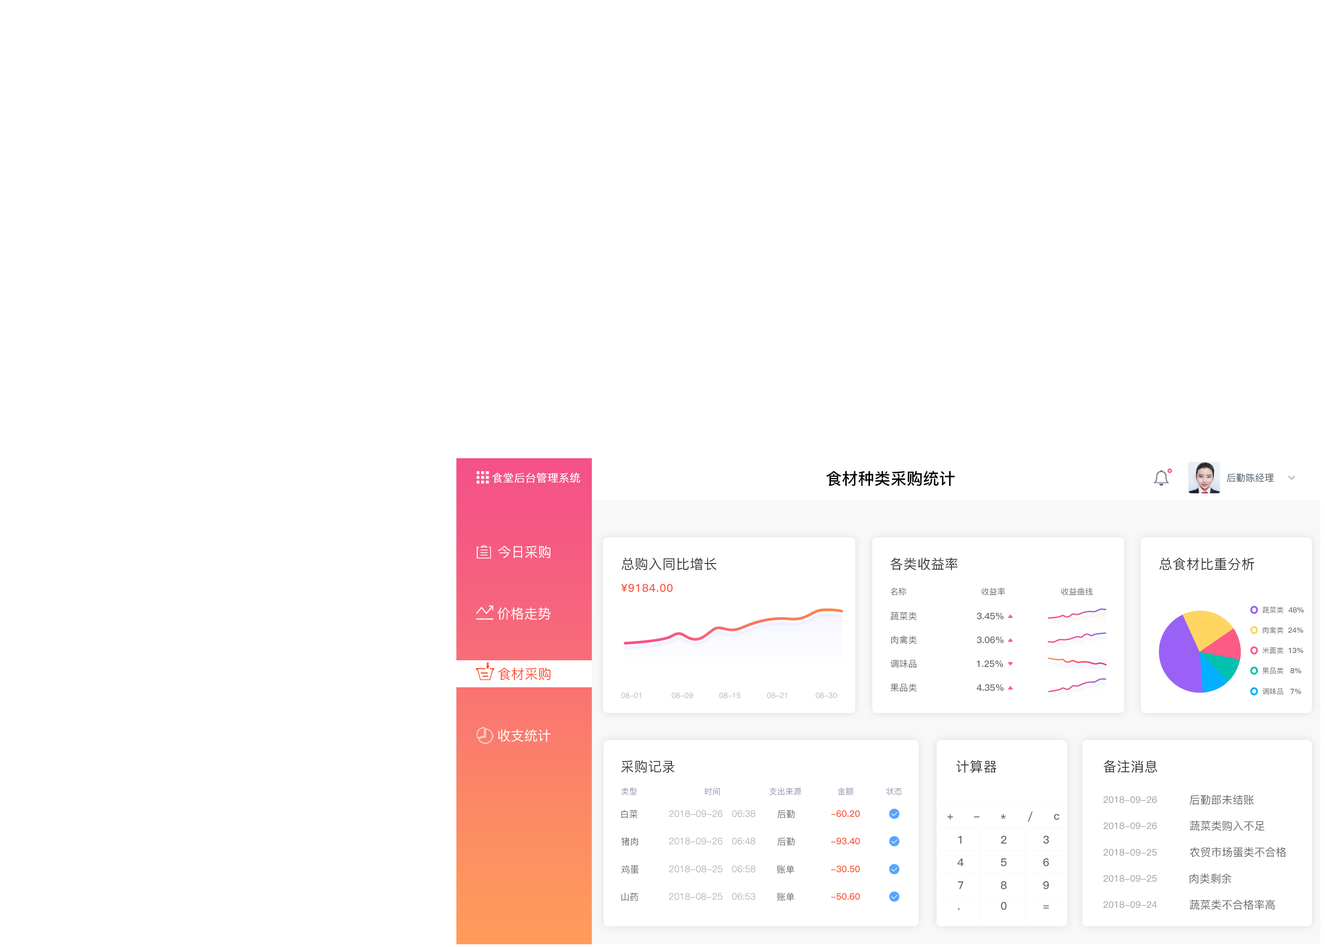
<style>
.page{position:relative;width:1325px;height:947px;background:#ffffff}
.page>*{position:absolute;margin:0}
.t1{font:10.8px "PingFang-SC-Regular";color:#ffffff;font-weight:bold}
.t2{font:16.2px "PingFang-SC-Bold";color:#000000}
.t3{font:9.3px "PingFang-SC-Light";color:#56606f;font-weight:bold}
.t4{font:13.5px "PingFang-SC-Medium";color:#ffffff}
.t5{font:13.5px "PingFang-SC-Medium";letter-spacing:0.02em;color:#333333}
.t6{font:10.8px "PingFang-SC-Bold";letter-spacing:0.05em;color:#fb5237}
.t7{font:8.1px "PingFang-SC-Medium";color:#666666}
.t8{font:9px "PingFang-SC-Medium";color:#666666}
.t9{font:9px "PingFang-SC-Bold";color:#666666}
.t10{font:7.2px "PingFang-SC-Medium";color:#666666}
.t11{font:7.2px "PingFang-SC-Bold";color:#666666}
.t12{font:13.5px "PingFang-SC-Medium";color:#ff4d30}
.t13{font:7.2px "PingFang-SC-Regular";color:#999999}
.t14{font:8.1px "PingFang-SC-Medium";color:#8c92a9}
.t15{font:9px "PingFang-SC-Medium";color:#999999}
.t16{font:10.8px "PingFang-SC-Medium";color:#666666}
.t17{font:9px "PingFang-SC-Regular";color:#999999}
.t18{font:9px "PingFang-SC-Bold";color:#fb5237}
.t19{font:10.8px "PingFang-SC-Bold";color:#666666}
</style>
<div class="page">
<p class="t1" style="left:492px;top:472px;width:88px;height:11px">食堂后台管理系统</p>
<p class="t2" style="left:826px;top:471px;width:129px;height:15px">食材种类采购统计</p>
<p class="t3" style="left:1226px;top:473px;width:48px;height:9px">后勤陈经理</p>
<p class="t4" style="left:498px;top:545px;width:52px;height:13px">今日采购</p>
<p class="t5" style="left:621px;top:558px;width:95px;height:12px">总购入同比增长</p>
<p class="t5" style="left:890px;top:558px;width:68px;height:12px">各类收益率</p>
<p class="t5" style="left:1159px;top:558px;width:95px;height:12px">总食材比重分析</p>
<p class="t6" style="left:621px;top:584px;width:52px;height:8px">¥9184.00</p>
<p class="t7" style="left:890px;top:588px;width:16px;height:7px">名称</p>
<p class="t7" style="left:981px;top:588px;width:24px;height:7px">收益率</p>
<p class="t7" style="left:1061px;top:588px;width:32px;height:7px">收益曲线</p>
<p class="t4" style="left:497px;top:607px;width:54px;height:13px">价格走势</p>
<p class="t8" style="left:890px;top:612px;width:27px;height:8px">蔬菜类</p>
<p class="t9" style="left:976px;top:612px;width:28px;height:7px">3.45%</p>
<p class="t10" style="left:1262px;top:606px;width:21px;height:7px">蔬菜类</p>
<p class="t11" style="left:1288px;top:607px;width:16px;height:5px">48%</p>
<p class="t10" style="left:1263px;top:626px;width:20px;height:8px">肉禽类</p>
<p class="t11" style="left:1288px;top:627px;width:15px;height:6px">24%</p>
<p class="t8" style="left:891px;top:635px;width:26px;height:9px">肉禽类</p>
<p class="t9" style="left:976px;top:636px;width:28px;height:7px">3.06%</p>
<p class="t10" style="left:1262px;top:647px;width:21px;height:7px">米面类</p>
<p class="t11" style="left:1288px;top:648px;width:15px;height:5px">13%</p>
<p class="t8" style="left:890px;top:659px;width:26px;height:9px">调味品</p>
<p class="t9" style="left:976px;top:660px;width:27px;height:7px">1.25%</p>
<p class="t12" style="left:498px;top:667px;width:52px;height:13px">食材采购</p>
<p class="t10" style="left:1262px;top:667px;width:21px;height:7px">果品类</p>
<p class="t11" style="left:1290px;top:668px;width:11px;height:5px">8%</p>
<p class="t8" style="left:890px;top:683px;width:27px;height:9px">果品类</p>
<p class="t9" style="left:976px;top:684px;width:28px;height:7px">4.35%</p>
<p class="t10" style="left:1262px;top:688px;width:21px;height:7px">调味品</p>
<p class="t11" style="left:1290px;top:688px;width:11px;height:6px">7%</p>
<p class="t13" style="left:621px;top:693px;width:20px;height:5px">08-01</p>
<p class="t13" style="left:671px;top:693px;width:22px;height:5px">08-09</p>
<p class="t13" style="left:719px;top:693px;width:21px;height:5px">08-15</p>
<p class="t13" style="left:767px;top:693px;width:20px;height:5px">08-21</p>
<p class="t13" style="left:815px;top:693px;width:22px;height:5px">08-30</p>
<p class="t4" style="left:498px;top:729px;width:53px;height:13px">收支统计</p>
<p class="t5" style="left:621px;top:760px;width:54px;height:13px">采购记录</p>
<p class="t5" style="left:956px;top:760px;width:40px;height:13px">计算器</p>
<p class="t5" style="left:1103px;top:760px;width:54px;height:13px">备注消息</p>
<p class="t14" style="left:621px;top:788px;width:16px;height:7px">类型</p>
<p class="t14" style="left:705px;top:788px;width:15px;height:7px">时间</p>
<p class="t14" style="left:769px;top:788px;width:32px;height:7px">支出来源</p>
<p class="t14" style="left:837px;top:788px;width:16px;height:7px">金额</p>
<p class="t14" style="left:886px;top:788px;width:16px;height:7px">状态</p>
<p class="t15" style="left:1103px;top:796px;width:53px;height:7px">2018-09-26</p>
<p class="t16" style="left:1189px;top:794px;width:65px;height:11px">后勤部未结账</p>
<p class="t8" style="left:621px;top:810px;width:17px;height:8px">白菜</p>
<p class="t8" style="left:777px;top:810px;width:18px;height:8px">后勤</p>
<p class="t17" style="left:669px;top:810px;width:86px;height:7px">2018-09-26   06:38</p>
<p class="t18" style="left:831px;top:810px;width:29px;height:7px">-60.20</p>
<p class="t19" style="left:947px;top:814px;width:6px;height:5px">+</p>
<p class="t19" style="left:974px;top:816px;width:6px;height:1px">-</p>
<p class="t19" style="left:1000px;top:814px;width:6px;height:5px">*</p>
<p class="t19" style="left:1027px;top:811px;width:6px;height:11px">/</p>
<p class="t19" style="left:1054px;top:814px;width:5px;height:6px">c</p>
<p class="t16" style="left:1189px;top:820px;width:75px;height:11px">蔬菜类购入不足</p>
<p class="t15" style="left:1103px;top:822px;width:53px;height:7px">2018-09-26</p>
<p class="t8" style="left:621px;top:837px;width:17px;height:9px">猪肉</p>
<p class="t17" style="left:669px;top:837px;width:86px;height:7px">2018-09-26   06:48</p>
<p class="t8" style="left:777px;top:837px;width:18px;height:9px">后勤</p>
<p class="t18" style="left:831px;top:837px;width:29px;height:7px">-93.40</p>
<p class="t19" style="left:958px;top:836px;width:3px;height:8px">1</p>
<p class="t19" style="left:1001px;top:835px;width:5px;height:9px">2</p>
<p class="t19" style="left:1043px;top:835px;width:6px;height:9px">3</p>
<p class="t19" style="left:1043px;top:858px;width:6px;height:8px">6</p>
<p class="t15" style="left:1103px;top:849px;width:53px;height:6px">2018-09-25</p>
<p class="t16" style="left:1190px;top:847px;width:96px;height:10px">农贸市场蛋类不合格</p>
<p class="t8" style="left:621px;top:865px;width:18px;height:8px">鸡蛋</p>
<p class="t17" style="left:669px;top:865px;width:86px;height:7px">2018-08-25   06:58</p>
<p class="t8" style="left:777px;top:865px;width:17px;height:8px">账单</p>
<p class="t18" style="left:831px;top:865px;width:29px;height:7px">-30.50</p>
<p class="t19" style="left:957px;top:858px;width:6px;height:8px">4</p>
<p class="t19" style="left:1001px;top:858px;width:6px;height:8px">5</p>
<p class="t19" style="left:958px;top:881px;width:5px;height:8px">7</p>
<p class="t19" style="left:1000px;top:881px;width:7px;height:8px">8</p>
<p class="t19" style="left:1043px;top:881px;width:6px;height:8px">9</p>
<p class="t15" style="left:1103px;top:875px;width:53px;height:7px">2018-09-25</p>
<p class="t16" style="left:1189px;top:873px;width:42px;height:10px">肉类剩余</p>
<p class="t8" style="left:621px;top:892px;width:17px;height:9px">山药</p>
<p class="t17" style="left:669px;top:893px;width:86px;height:7px">2018-08-25   06:53</p>
<p class="t8" style="left:777px;top:892px;width:17px;height:9px">账单</p>
<p class="t18" style="left:831px;top:893px;width:29px;height:7px">-50.60</p>
<p class="t19" style="left:1001px;top:901px;width:6px;height:9px">0</p>
<p class="t19" style="left:1043px;top:905px;width:6px;height:4px">=</p>
<p class="t15" style="left:1103px;top:901px;width:54px;height:7px">2018-09-24</p>
<p class="t16" style="left:1189px;top:900px;width:86px;height:10px">蔬菜类不合格率高</p>
<p class="t19" style="left:958px;top:908px;width:1px;height:2px">.</p>
</div>
